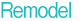
<style>
.page{position:relative;width:84px;height:21px;background:#ffffff}
.page>*{position:absolute;margin:0}
.t1{font:20px "GothicMB101Pro-Regular";letter-spacing:-0.06em;color:#1dbcc0;scale:0.9 1}
</style>
<div class="page">
<p class="t1" style="left:1px;top:2px;width:70px;height:16px">Remodel</p>
</div>
